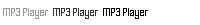
<style>
.page{position:relative;width:200px;height:25px;background:#ffffff}
.page>*{position:absolute;margin:0}
.t1{font:11px "Aldo-SemiBold";color:#999999}
.t2{font:11px "Aldo-SemiBold";color:#333333}
.t3{font:11px "Aldo-SemiBold";color:#000000}
</style>
<div class="page">
<p class="t1" style="left:3px;top:8px;width:45px;height:11px">MP3 Player</p>
<p class="t2" style="left:53px;top:8px;width:45px;height:11px">MP3 Player</p>
<p class="t3" style="left:103px;top:8px;width:45px;height:11px">MP3 Player</p>
</div>
